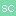
<style>
.page{position:relative;width:16px;height:16px;background:#78dba9}
.page>*{position:absolute;margin:0}
.t1{font:14px "ProximaNova-Light";color:#ffffff}
</style>
<div class="page">
<p class="t1" style="left:2px;top:5px;width:12px;height:7px">sc</p>
</div>
